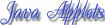
<style>
.page{position:relative;width:105px;height:25px;background:#ffffff}
.page>*{position:absolute;margin:0}
.t1{font:24px "UkrainianDecor";color:#3044df}
</style>
<div class="page">
<p class="t1" style="left:0px;top:0px;width:105px;height:25px">Java Applets</p>
</div>
